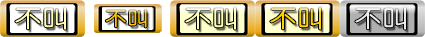
<style>
.page{position:relative;width:425px;height:37px}
.page>*{position:absolute;margin:0}
.t1{font:23.3px "YouYuan";color:#fffeb0;font-weight:bold;scale:1.14 1}
.t2{font:18.6px "YouYuan";color:#ffc600;font-weight:bold;scale:1.14 1}
.t3{font:23.3px "YouYuan";color:#ffd100;font-weight:bold;scale:1.14 1}
.t4{font:23.3px "YouYuan";color:#eaeaea;font-weight:bold;scale:1.14 1}
</style>
<div class="page">
<p class="t1" style="left:15px;top:7px;width:51px;height:23px">不叫</p>
<p class="t2" style="left:105px;top:9px;width:42px;height:19px">不叫</p>
<p class="t1" style="left:185px;top:7px;width:51px;height:23px">不叫</p>
<p class="t3" style="left:270px;top:7px;width:51px;height:23px">不叫</p>
<p class="t4" style="left:355px;top:7px;width:51px;height:23px">不叫</p>
</div>
